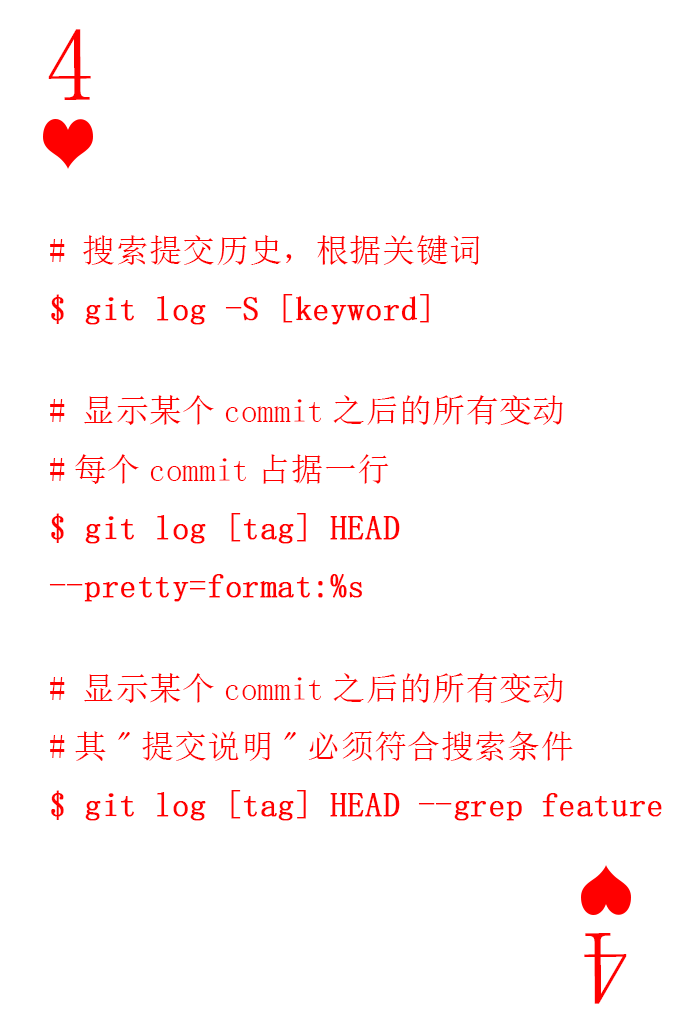
<style>
.page{position:relative;width:673px;height:1028px;background:#ffffff}
.page>*{position:absolute;margin:0}
.t1{font:104.2px "SimSun-ExtB";color:#ff0101;scale:0.93 1}
.t2{font:33.3px "SimSun";color:#ff0000;font-weight:bold}
.t3{font:33.3px "SimSun";color:#ff0000}
</style>
<div class="page">
<p class="t1" style="left:48px;top:29px;width:43px;height:71px">4</p>
<p class="t2" style="left:49px;top:235px;width:613px;height:586px"><span class="t3"># 搜索提交历史，根据关键词<br></span>$ git log -S [keyword]<br> <br><span class="t3"># 显示某个commit之后的所有变动<br>#每个commit占据一行<br></span>$ git log [tag] HEAD <br>--pretty=format:%s<br> <br><span class="t3"># 显示某个commit之后的所有变动<br>#其"提交说明"必须符合搜索条件<br></span>$ git log [tag] HEAD --grep feature</p>
<p class="t1" style="left:584px;top:933px;width:43px;height:71px;rotate:180deg">4</p>
</div>
